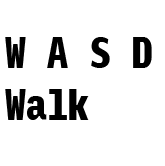
<style>
.page{position:relative;width:165px;height:166px;background:#ffffff}
.page>*{position:absolute;margin:0}
.t1{font:43.2px "InputMonoCompressed-Black";letter-spacing:-0.04em;color:#000000}
</style>
<div class="page">
<p class="t1" style="left:5px;top:37px;width:147px;height:83px">W A S D<br>Walk</p>
</div>
